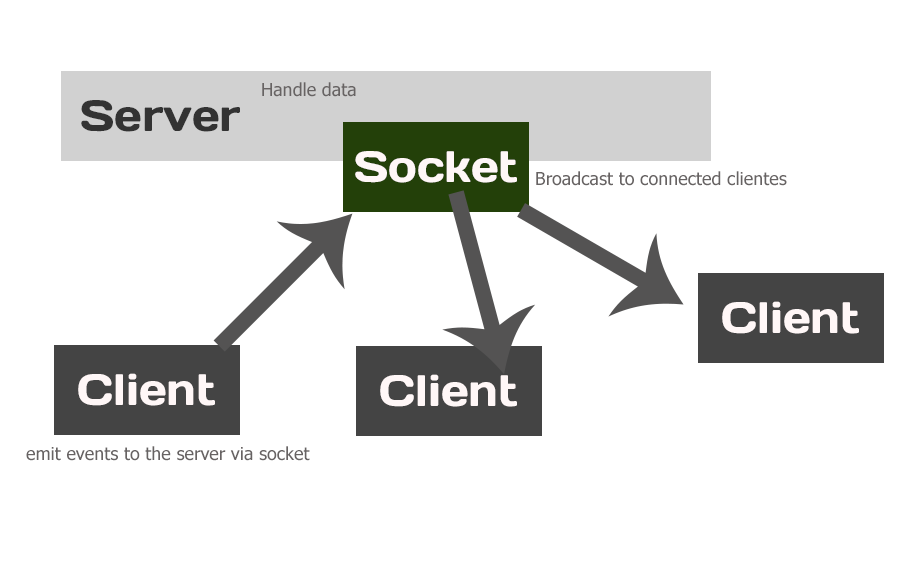
<style>
.page{position:relative;width:918px;height:569px;background:#ffffff}
.page>*{position:absolute;margin:0}
.t1{font:18px "Tahoma";color:#676363}
.t2{font:44px "DaysOne-Regular";color:#333333}
.t3{font:44px "DaysOne-Regular";color:#fff7f7}
</style>
<div class="page">
<p class="t1" style="left:262px;top:82px;width:94px;height:15px">Handle data</p>
<p class="t2" style="left:81px;top:100px;width:159px;height:32px">Server</p>
<p class="t3" style="left:355px;top:151px;width:162px;height:32px">Socket</p>
<p class="t1" style="left:536px;top:171px;width:251px;height:15px">Broadcast to connected clientes</p>
<p class="t1" style="left:26px;top:446px;width:284px;height:15px">emit events to the server via socket</p>
</div>
